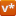
<style>
.page{position:relative;width:16px;height:16px}
.page>*{position:absolute;margin:0}
.t1{font:11.6px "OpenSans-Bold";color:#f6f7f2}
</style>
<div class="page">
<p class="t1" style="left:1px;top:3px;width:14px;height:9px">v*</p>
</div>
